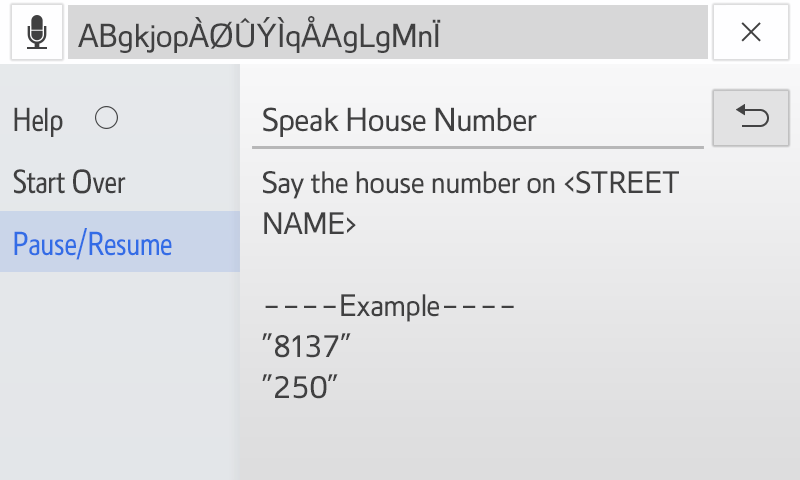
<style>
.page{position:relative;width:800px;height:480px}
.page>*{position:absolute;margin:0}
.t1{font:30px "Tfont1411_T1S";color:#404041}
.t2{font:30px "Tfont1411_T2S";color:#404041}
.t3{font:30px "Tfont1411_T1S";color:#404040}
.t4{font:28px/41px "Tfont1411_T1S";color:#404040}
.t5{font:30px "Tfont1411_T2S";color:#336ce6}
</style>
<div class="page">
<p class="t1" style="left:78px;top:16px;width:363px;height:37px">ABgkjopÀØÛÝÌqÅAgLgMnÏ</p>
<p class="t2" style="left:14px;top:107px;width:49px;height:30px">Help</p>
<p class="t3" style="left:263px;top:107px;width:274px;height:30px">Speak House Number</p>
<p class="t2" style="left:13px;top:169px;width:113px;height:25px">Start Over</p>
<p class="t4" style="left:263px;top:171px;width:416px;height:151px">Say the house number on &lt;STREET<br>NAME&gt;<br><br>----Example----</p>
<p class="t5" style="left:14px;top:228px;width:158px;height:32px">Pause/Resume</p>
<p class="t4" style="left:262px;top:333px;width:89px;height:66px">”8137”<br>”250”</p>
</div>
